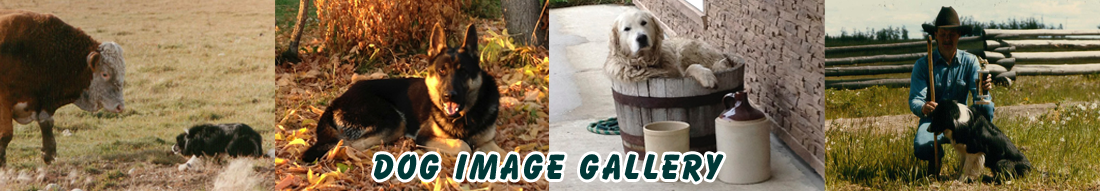
<style>
.page{position:relative;width:1100px;height:191px}
.page>*{position:absolute;margin:0}
.t1{font:36px "BalloonBT-ExtraBold";letter-spacing:0.075em;color:#003736}
</style>
<div class="page">
<p class="t1" style="left:374px;top:154px;width:350px;height:28px">DOG image gallery</p>
</div>
